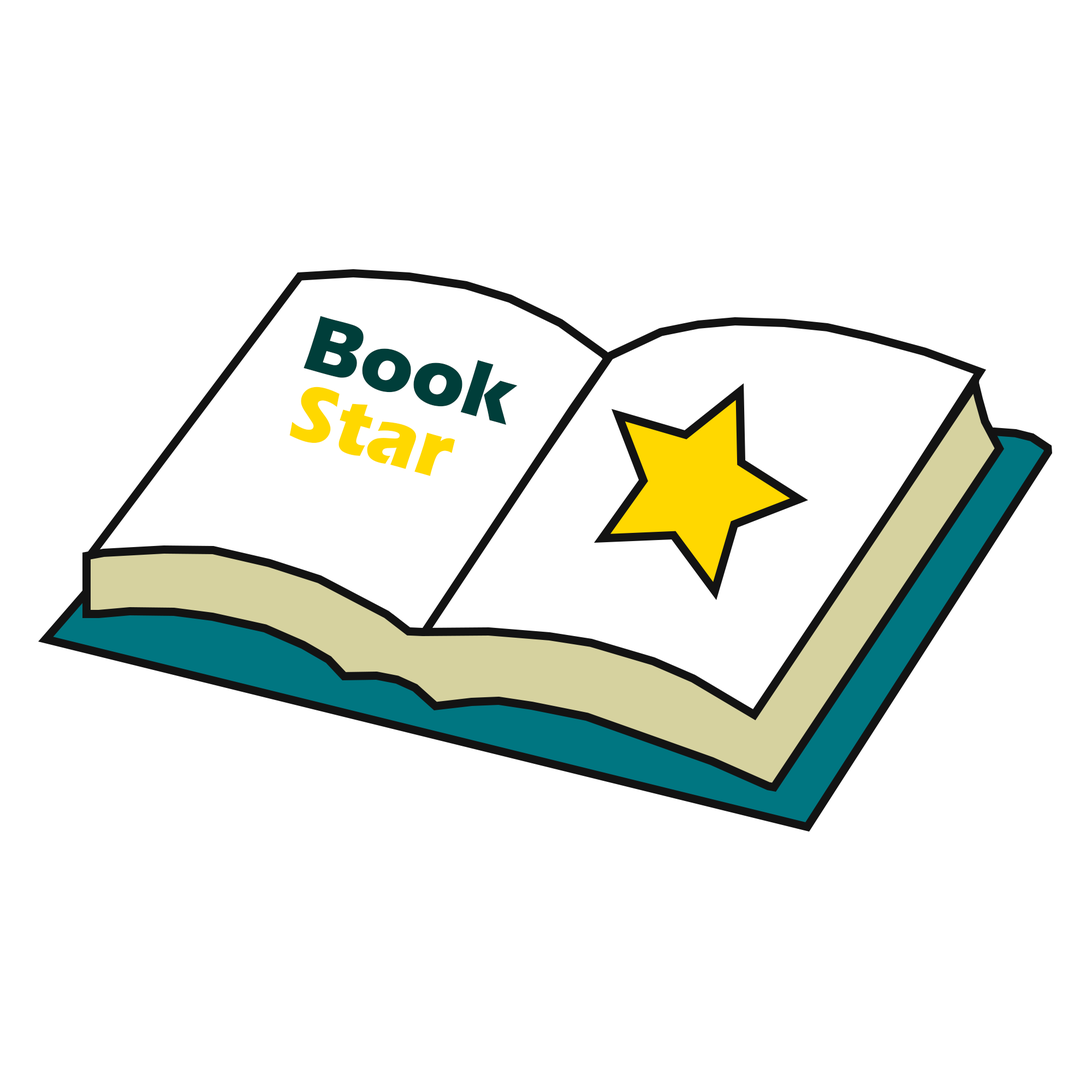
<style>
.page{position:relative;width:1092px;height:1092px;background:#ffffff}
.page>*{position:absolute;margin:0}
.t1{font:81.9px "ErasITC-Bold";color:#003e3a}
.t2{font:81.9px "ErasITC-Bold";color:#ffd800}
</style>
<div class="page">
<p class="t1" style="left:304px;top:316px;width:214px;height:109px;rotate:16deg">Book</p>
<p class="t2" style="left:289px;top:387px;width:166px;height:89px;rotate:16deg">Star</p>
</div>
